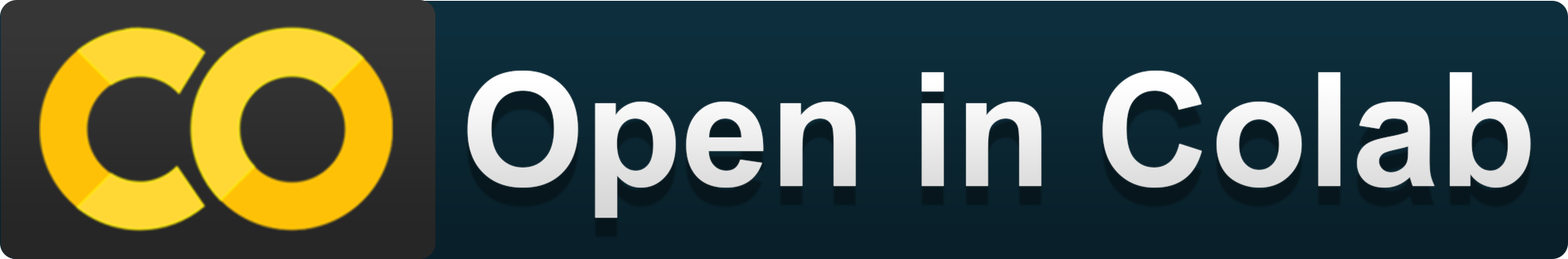
<style>
.page{position:relative;width:1568px;height:259px}
.page>*{position:absolute;margin:0}
.t1{font:158.6px "Arial-BoldMT";color:#ffffff}
</style>
<div class="page">
<p class="t1" style="left:467px;top:71px;width:1064px;height:146px">Open in Colab</p>
</div>
